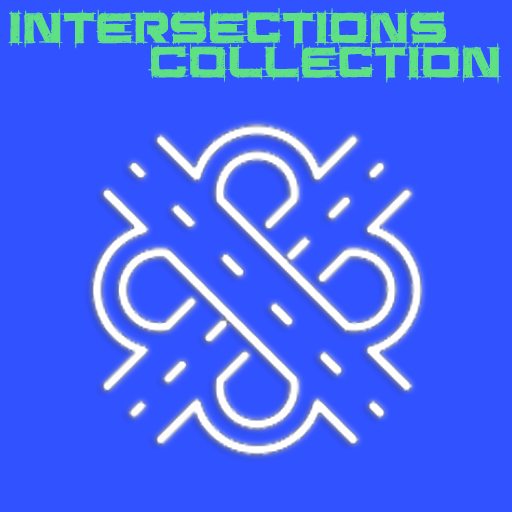
<style>
.page{position:relative;width:512px;height:512px;background:#3152ff}
.page>*{position:absolute;margin:0}
.t1{font:50px "SaucerBB";color:#5fe083}
</style>
<div class="page">
<p class="t1" style="left:8px;top:8px;width:439px;height:41px">INTERSECTIONS</p>
<p class="t1" style="left:148px;top:42px;width:354px;height:42px">colLECTION</p>
</div>
